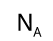
<style>
.page{position:relative;width:53px;height:41px;background:#ffffff}
.page>*{position:absolute;margin:0}
.t1{font:23.7px "DroidSans";color:#000000}
.t2{font:13.4px "DroidSans";color:#000000}
</style>
<div class="page">
<p class="t1" style="left:18px;top:13px;width:14px;height:18px">N</p>
<p class="t2" style="left:33px;top:27px;width:9px;height:10px">A</p>
</div>
